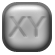
<style>
.page{position:relative;width:55px;height:55px;background:#ffffff}
.page>*{position:absolute;margin:0}
.t1{font:28px "ArialMT";color:#969696}
</style>
<div class="page">
<p class="t1" style="left:9px;top:17px;width:37px;height:20px">XY</p>
</div>
